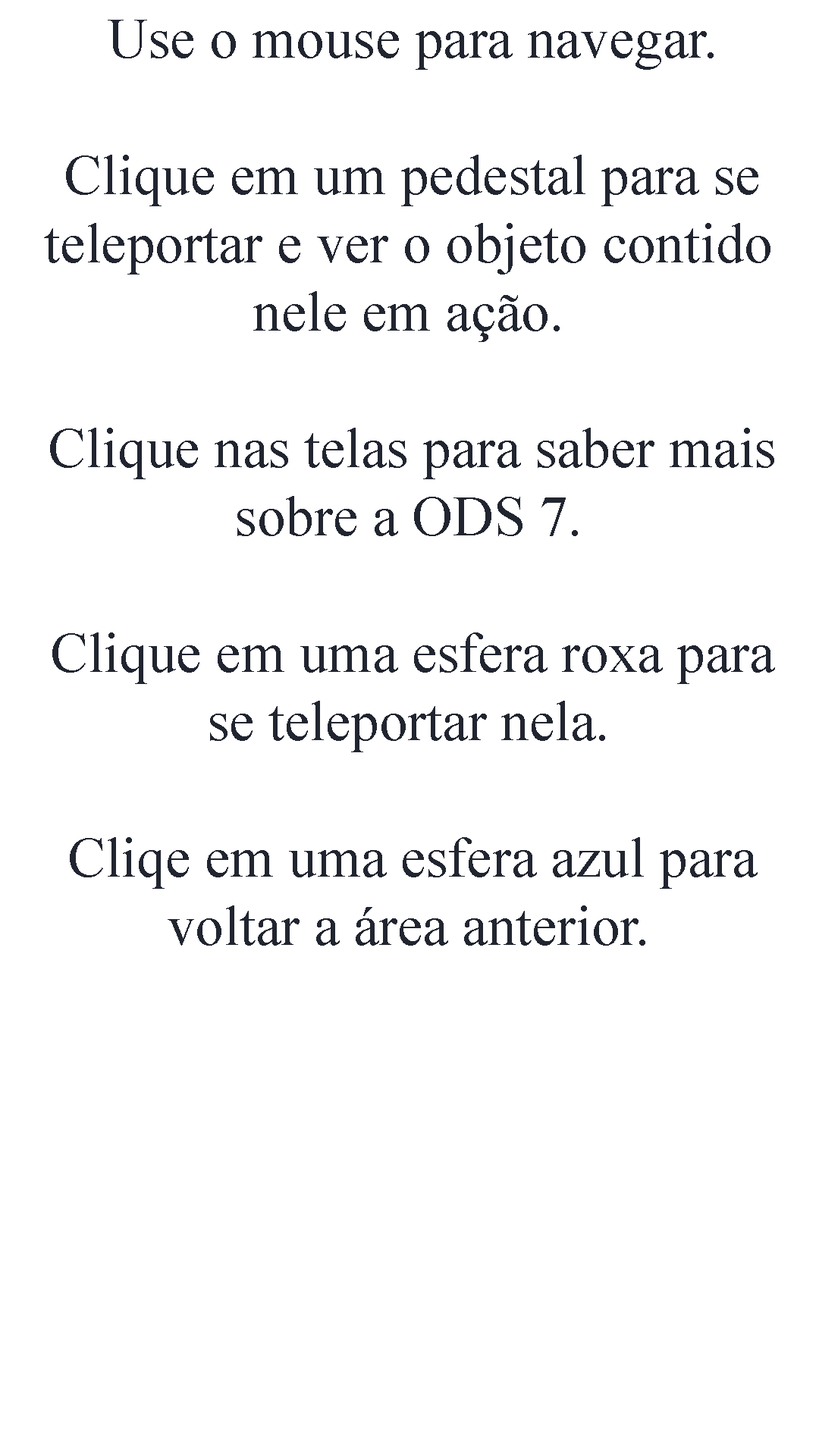
<style>
.page{position:relative;width:819px;height:1456px;background:#ffffff}
.page>*{position:absolute;margin:0}
.t1{font:56.9px "TimesNewRomanPSMT";color:#212530}
</style>
<div class="page">
<p class="t1" style="left:44px;top:20px;width:731px;height:926px;text-align:center">Use o mouse para navegar.<br><br>Clique em um pedestal para se teleportar e ver o objeto contido nele em ação.<br><br>Clique nas telas para saber mais sobre a ODS 7.<br><br>Clique em uma esfera roxa para se teleportar nela.<br><br>Cliqe em uma esfera azul para voltar a área anterior.</p>
</div>
